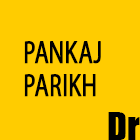
<style>
.page{position:relative;width:140px;height:140px;background:#ffcc00}
.page>*{position:absolute;margin:0}
.t1{font:32.1px/33px "MyriadPro-Regular";color:#000000;text-transform:uppercase;font-weight:bold;scale:0.72 1}
.t2{font:35.9px "Impact";color:#000000}
</style>
<div class="page">
<p class="t1" style="left:24px;top:41px;width:77px;height:56px">Pankaj<br>Parikh</p>
<p class="t2" style="left:108px;top:112px;width:32px;height:28px">Dr</p>
</div>
